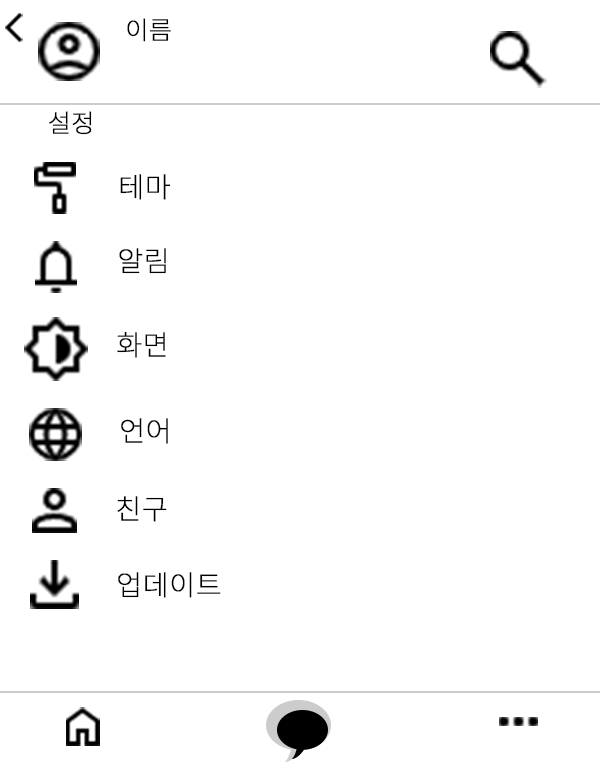
<style>
.page{position:relative;width:600px;height:768px;background:#ffffff}
.page>*{position:absolute;margin:0}
.t1{font:25px "NotoSansKR-Thin";color:#000000;font-weight:bold}
.t2{font:28px "NotoSansKR-Thin";color:#000000;font-weight:bold}
</style>
<div class="page">
<p class="t1" style="left:127px;top:18px;width:44px;height:24px">이름</p>
<p class="t1" style="left:49px;top:111px;width:43px;height:24px">설정</p>
<p class="t2" style="left:120px;top:174px;width:51px;height:26px">테마</p>
<p class="t2" style="left:119px;top:248px;width:47px;height:26px">알림</p>
<p class="t2" style="left:117px;top:331px;width:49px;height:27px">화면</p>
<p class="t2" style="left:121px;top:418px;width:47px;height:26px">언어</p>
<p class="t2" style="left:117px;top:496px;width:50px;height:26px">친구</p>
<p class="t2" style="left:118px;top:572px;width:103px;height:26px">업데이트</p>
</div>
